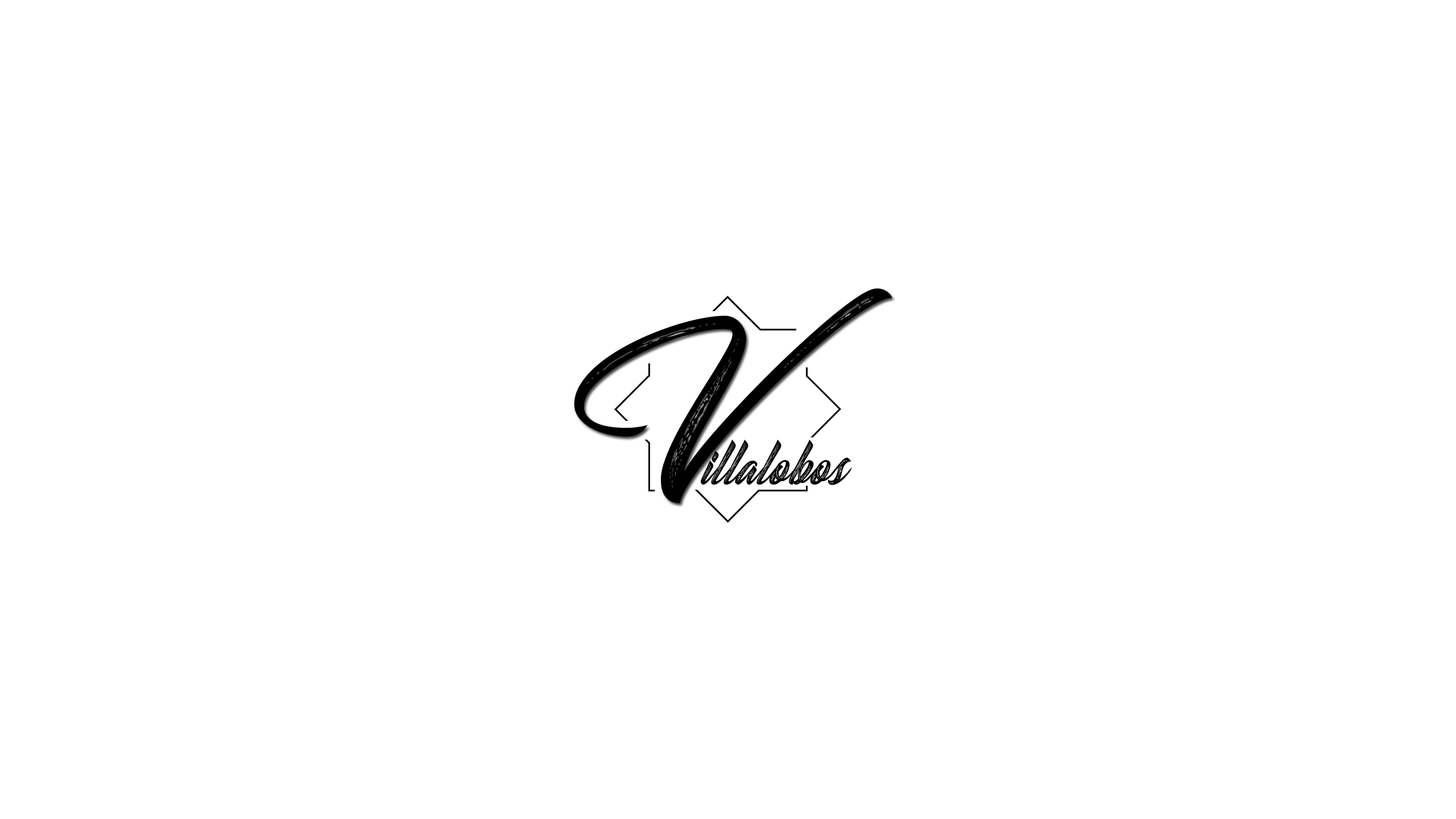
<style>
.page{position:relative;width:1456px;height:819px;background:#ffffff}
.page>*{position:absolute;margin:0}
.t1{font:142.2px "SouthGardensPersonalUse";color:#000000}
.t2{font:48.3px "SouthGardensPersonalUse";color:#000000}
</style>
<div class="page">
<p class="t1" style="left:574px;top:288px;width:318px;height:215px">V</p>
<p class="t2" style="left:701px;top:440px;width:151px;height:45px">illalobos</p>
</div>
